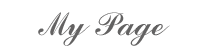
<style>
.page{position:relative;width:210px;height:51px;background:#ffffff}
.page>*{position:absolute;margin:0}
.t1{font:36px "CommercialScriptBT-Regular";color:#636262}
</style>
<div class="page">
<p class="t1" style="left:38px;top:12px;width:132px;height:34px">My Page</p>
</div>
